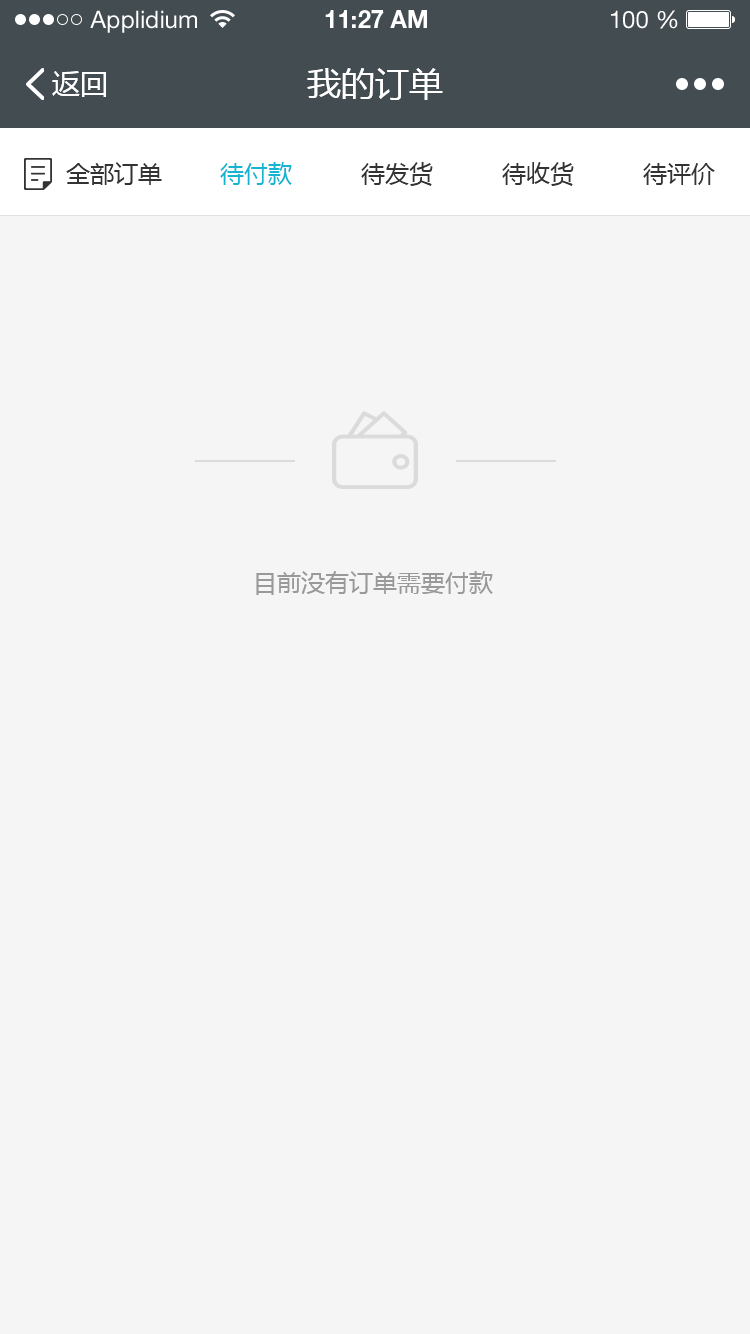
<style>
.page{position:relative;width:750px;height:1334px;background:#f5f5f5}
.page>*{position:absolute;margin:0}
.t1{font:24px "HelveticaNeueLTStd-Roman";color:#ffffff}
.t2{font:24px "HelveticaNeueLTStd-Bd";color:#ffffff}
.t3{font:28px "MicrosoftYaHei";color:#ffffff}
.t4{font:34px "MicrosoftYaHei";color:#ffffff}
.t5{font:24px "MicrosoftYaHei";color:#333333}
.t6{font:24px "MicrosoftYaHei";color:#15b4d0}
.t7{font:24px "MicrosoftYaHei";color:#999999}
</style>
<div class="page">
<p class="t1" style="left:90px;top:10px;width:107px;height:23px">Applidium</p>
<p class="t2" style="left:325px;top:10px;width:102px;height:18px">11:27 AM</p>
<p class="t1" style="left:611px;top:10px;width:67px;height:19px">100 %</p>
<p class="t3" style="left:52px;top:71px;width:54px;height:26px">返回</p>
<p class="t4" style="left:307px;top:68px;width:136px;height:32px">我的订单</p>
<p class="t5" style="left:66px;top:162px;width:96px;height:23px">全部订单</p>
<p class="t6" style="left:220px;top:162px;width:72px;height:23px">待付款</p>
<p class="t5" style="left:361px;top:162px;width:72px;height:24px">待发货</p>
<p class="t5" style="left:502px;top:162px;width:72px;height:24px">待收货</p>
<p class="t5" style="left:643px;top:163px;width:72px;height:22px">待评价</p>
<p class="t7" style="left:256px;top:571px;width:237px;height:24px">目前没有订单需要付款</p>
</div>
